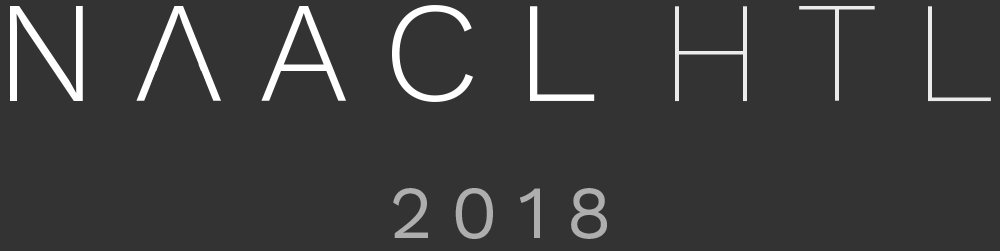
<style>
.page{position:relative;width:1000px;height:251px;background:#333333}
.page>*{position:absolute;margin:0}
.t1{font:143.6px "WorkSans-Light";letter-spacing:0.25em;color:#ffffff}
.t2{font:143.6px "WorkSans-ExtraLight";letter-spacing:0.25em;color:#ffffff}
.t3{font:74.9px "WorkSans-Regular";letter-spacing:0.25em;color:#aeaeae}
</style>
<div class="page">
<p class="t1" style="left:10px;top:5px;width:585px;height:97px">NAACL</p>
<p class="t2" style="left:675px;top:6px;width:316px;height:96px;opacity:0.9">HTL</p>
<p class="t3" style="left:393px;top:188px;width:214px;height:51px">2018</p>
</div>
